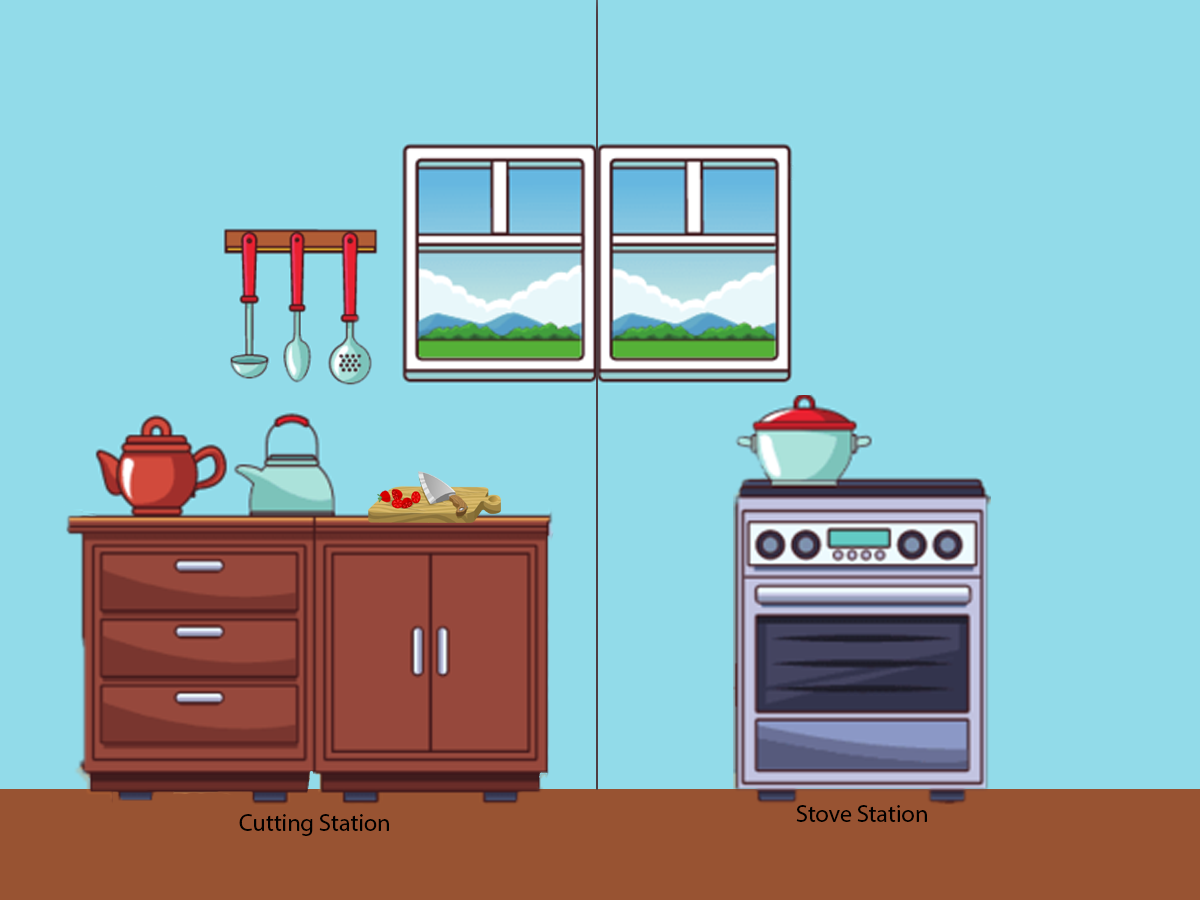
<style>
.page{position:relative;width:1200px;height:900px;background:#92dbe9}
.page>*{position:absolute;margin:0}
.t1{font:24px "MyriadPro-Regular";color:#000000}
</style>
<div class="page">
<p class="t1" style="left:796px;top:805px;width:131px;height:17px">Stove Station</p>
<p class="t1" style="left:239px;top:814px;width:150px;height:22px">Cutting Station</p>
</div>
